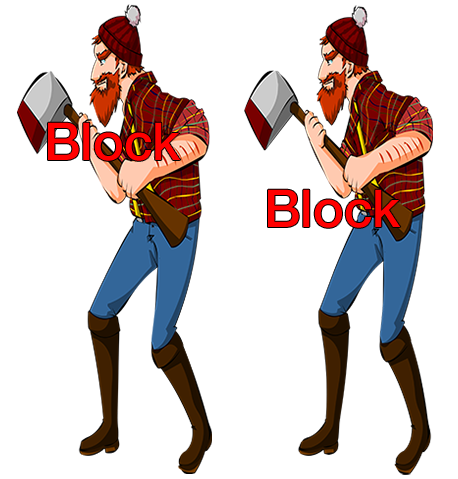
<style>
.page{position:relative;width:458px;height:479px;background:#ffffff}
.page>*{position:absolute;margin:0}
.t1{font:52px "HelveticaNeue-Medium";color:#ff0000}
</style>
<div class="page">
<p class="t1" style="left:48px;top:122px;width:133px;height:39px">Block</p>
<p class="t1" style="left:268px;top:189px;width:133px;height:39px">Block</p>
</div>
